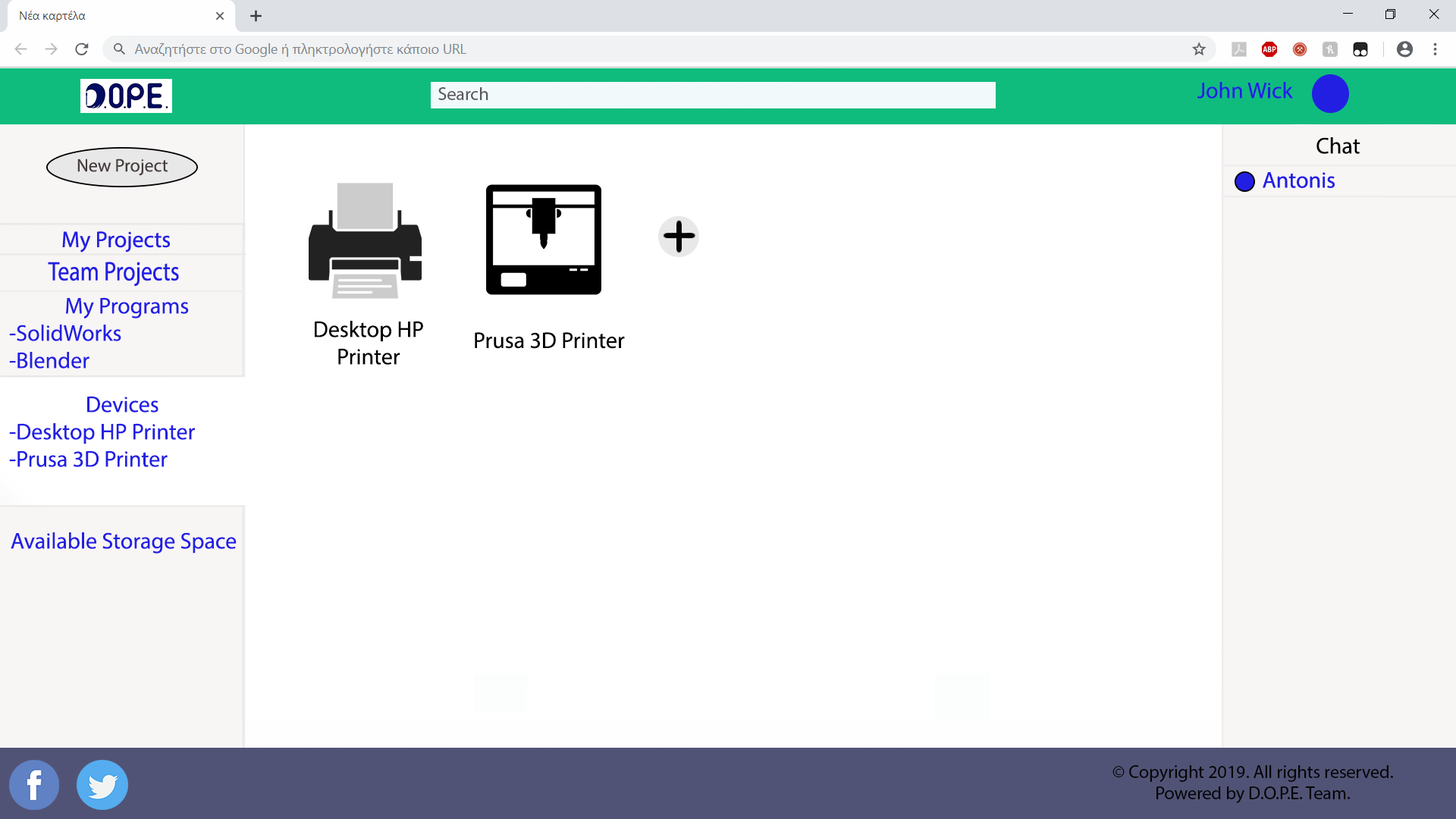
<style>
.page{position:relative;width:1456px;height:819px;background:#ffffff}
.page>*{position:absolute;margin:0}
.t1{font:18.2px "MyriadPro-Regular";color:#57575d}
.t2{font:22.7px "MyriadPro-Regular";color:#221fe3}
.t3{font:22.7px "MyriadPro-Regular";color:#000201}
.t4{font:18.2px "MyriadPro-Regular";color:#463d3d}
.t5{font:22.7px "MyriadPro-Regular";color:#010102}
.t6{font:18.2px "MyriadPro-Regular";color:#050505}
</style>
<div class="page">
<p class="t1" style="left:438px;top:87px;width:50px;height:13px">Search</p>
<p class="t2" style="left:1197px;top:82px;width:96px;height:17px">John Wick</p>
<p class="t3" style="left:1316px;top:137px;width:44px;height:17px">Chat</p>
<p class="t4" style="left:77px;top:158px;width:91px;height:18px">New Project</p>
<p class="t2" style="left:9px;top:297px;width:180px;height:72px;text-align:center">My Programs<br>-SolidWorks<br>-Blender</p>
<p class="t5" style="left:315px;top:321px;width:108px;height:44px;text-align:center">Desktop HP Printer</p>
<p class="t5" style="left:475px;top:332px;width:150px;height:17px">Prusa 3D Printer</p>
<p class="t2" style="left:87px;top:396px;width:71px;height:17px">Devices</p>
<p class="t2" style="left:9px;top:423px;width:186px;height:44px">-Desktop HP Printer<br>-Prusa 3D Printer</p>
<p class="t2" style="left:11px;top:532px;width:226px;height:22px">Available Storage Space</p>
<p class="t6" style="left:1112px;top:765px;width:281px;height:38px;text-align:center">© Copyright 2019. All rights reserved. Powered by D.O.P.E. Team.</p>
</div>
